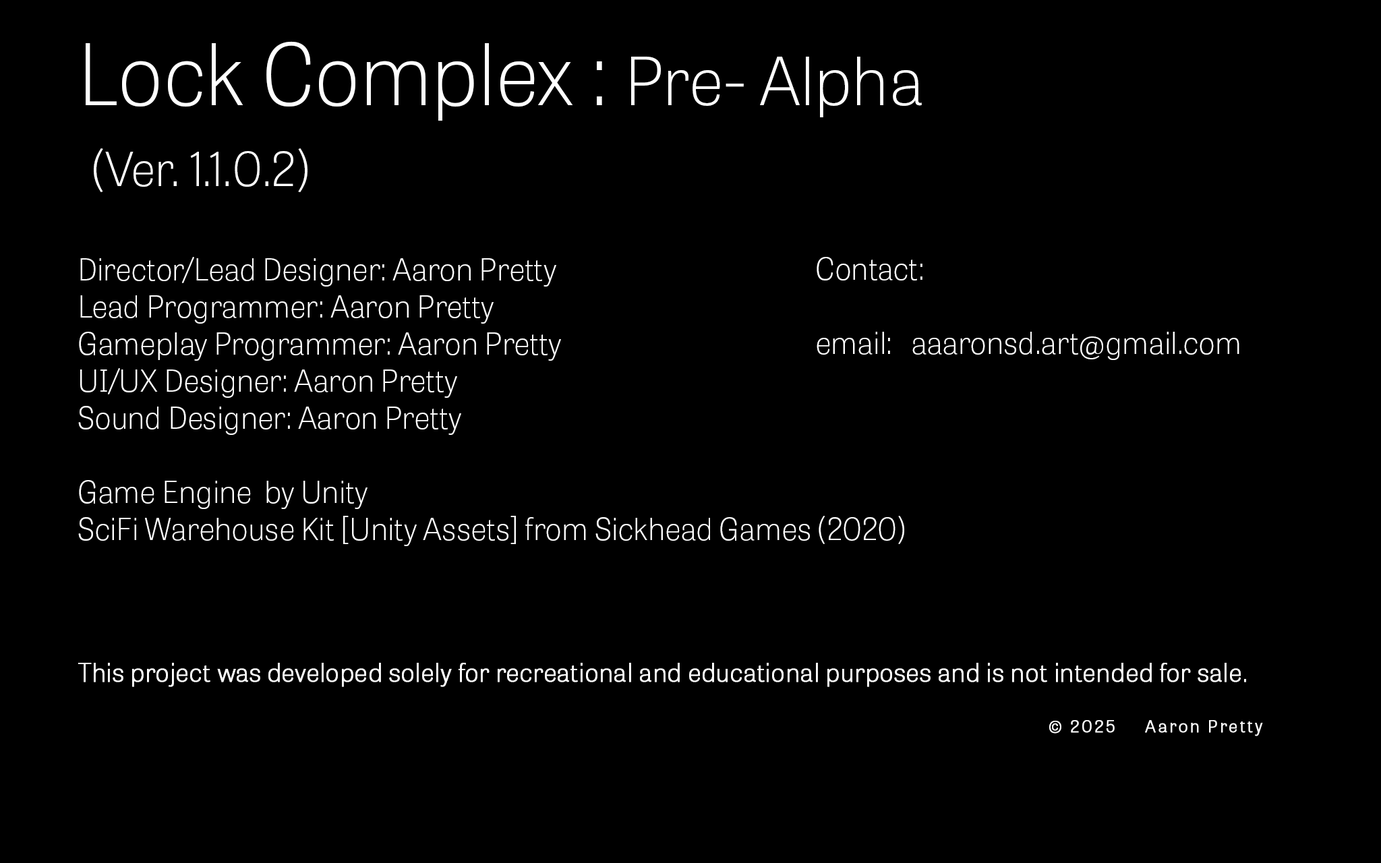
<style>
.page{position:relative;width:1381px;height:863px;background:#000000}
.page>*{position:absolute;margin:0}
.t1{font:30.9px "TabletGothic-Thin";color:#ffffff}
.t2{font:84.3px "TabletGothic-Thin";color:#ffffff}
.t3{font:67.4px "TabletGothic-Thin";color:#ffffff}
.t4{font:47.8px "TabletGothic-Thin";color:#ffffff}
.t5{font:25.3px "TabletGothic-Thin";color:#ffffff;font-weight:bold}
.t6{font:16.9px "TabletGothic-Thin";letter-spacing:0.12em;color:#ffffff;font-weight:bold}
</style>
<div class="page">
<p class="t1" style="left:78px;top:41px;width:1185px;height:695px"><span class="t2">Lock Complex : </span><span class="t3">Pre- Alpha<br> </span><span class="t4">(Ver. 1.1.0.2) <br><br></span>Director/Lead Designer: Aaron Pretty<br>Lead Programmer: Aaron Pretty <br>Gameplay Programmer: Aaron Pretty<br>UI/UX Designer: Aaron Pretty <br>Sound Designer: Aaron Pretty<br><br>Game Engine  by Unity<br>SciFi Warehouse Kit [Unity Assets] from Sickhead Games (2020)<br><br><br><br><span class="t5">This project was developed solely for recreational and educational purposes and is not intended for sale.<br>                                       <br></span><span class="t6">                                        © 2025   Aaron Pretty</span></p>
<p class="t1" style="left:817px;top:257px;width:423px;height:103px">Contact:<br><br>email:   aaaronsd.art@gmail.com</p>
</div>
